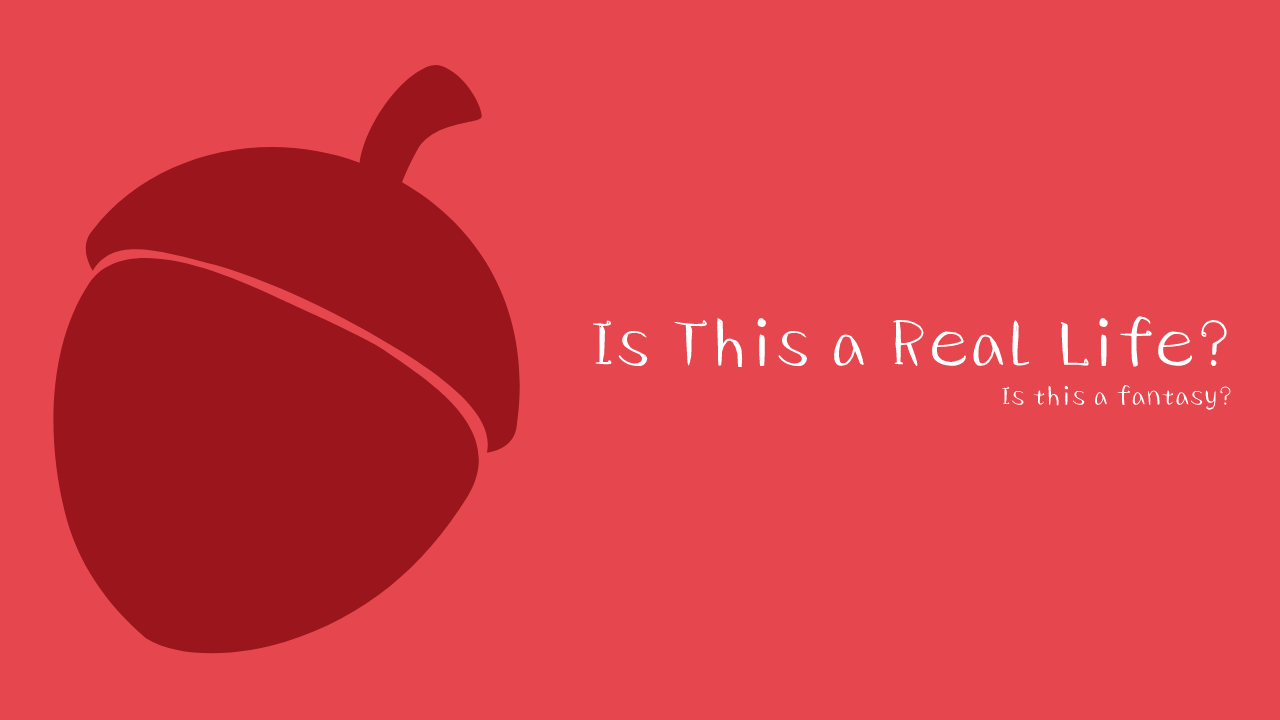
<style>
.page{position:relative;width:1280px;height:720px;background:#e6474f}
.page>*{position:absolute;margin:0}
.t1{font:68px "HYXiaoMaiTiJ";color:#ffffff}
.t2{font:27px "HYXiaoMaiTiJ";color:#ffffff}
</style>
<div class="page">
<p class="t1" style="left:592px;top:316px;width:636px;height:51px">Is This a Real Life?</p>
<p class="t2" style="left:1001px;top:385px;width:230px;height:25px">Is this a fantasy?</p>
</div>
